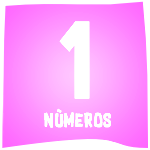
<style>
.page{position:relative;width:150px;height:150px}
.page>*{position:absolute;margin:0}
.t1{font:89.2px "SupersonicRocketship";letter-spacing:0.07em;color:#ffffff}
.t2{font:16.1px "SupersonicRocketship";letter-spacing:0.07em;color:#ffffff}
</style>
<div class="page">
<p class="t1" style="left:59px;top:21px;width:31px;height:78px">1</p>
<p class="t2" style="left:44px;top:108px;width:67px;height:20px">números</p>
</div>
